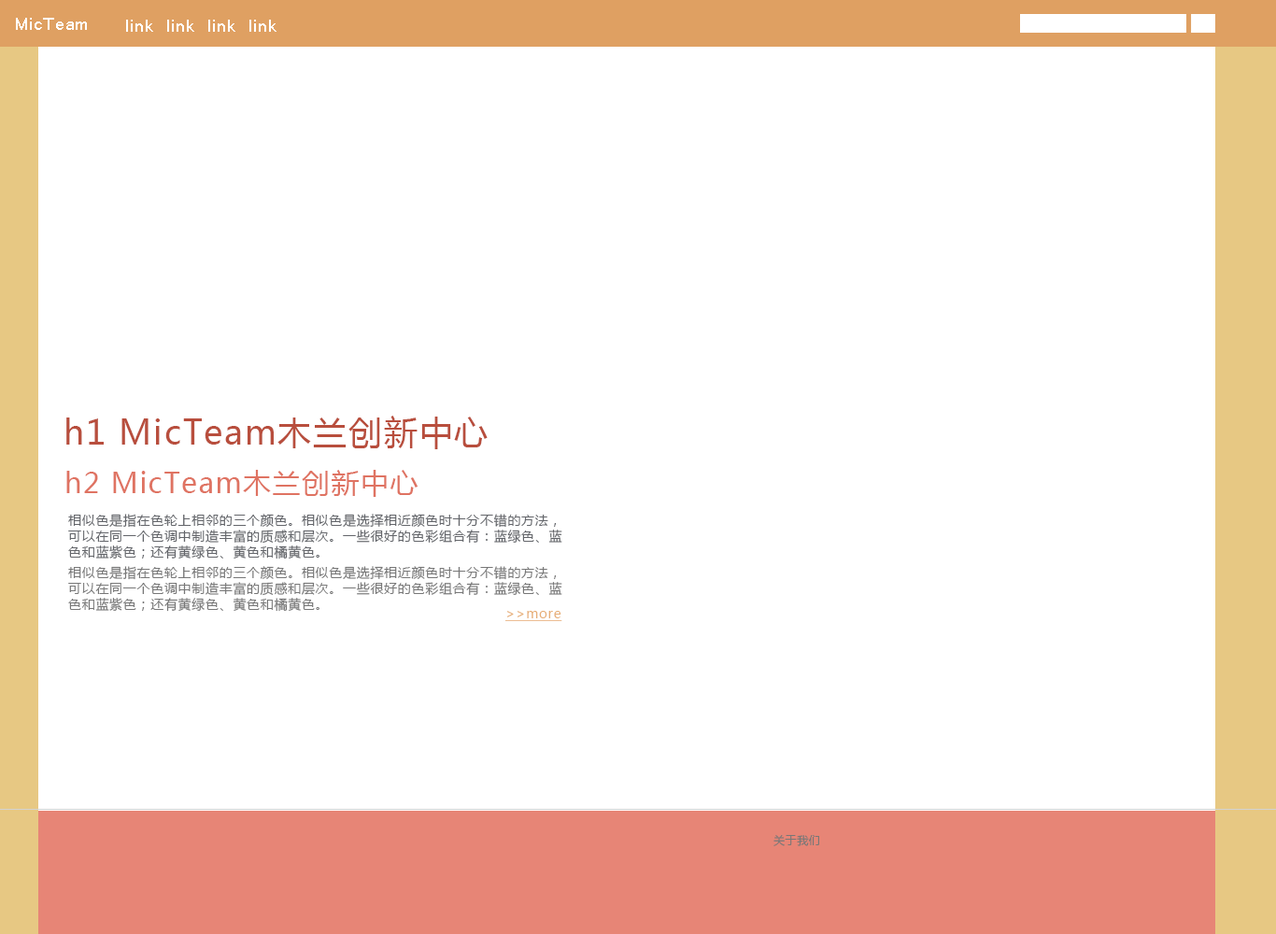
<style>
.page{position:relative;width:1276px;height:934px;background:#ffffff}
.page>*{position:absolute;margin:0}
.t1{font:16.8px "MicrosoftSansSerif";letter-spacing:0.05em;color:#ffffff}
.t2{font:33.6px "MicrosoftYaHei";letter-spacing:0.05em;color:#b84e3d}
.t3{font:28px "MicrosoftYaHei";letter-spacing:0.05em;color:#df7362}
.t4{font:13.1px/15.9px "MicrosoftYaHei";letter-spacing:0.05em;color:#63656a}
.t5{font:13.1px/15.9px "MicrosoftYaHei";letter-spacing:0.05em;color:#777777}
.t6{font:13.1px "MicrosoftYaHei";letter-spacing:0.05em;color:#e7ae76;text-decoration:underline}
.t7{font:11.2px "MicrosoftYaHei";letter-spacing:0.05em;color:#777777}
</style>
<div class="page">
<p class="t1" style="left:16px;top:18px;width:71px;height:12px">MicTeam</p>
<p class="t2" style="left:66px;top:416px;width:422px;height:33px">h1 MicTeam木兰创新中心</p>
<p class="t3" style="left:66px;top:470px;width:353px;height:27px">h2 MicTeam木兰创新中心</p>
<p class="t4" style="left:68px;top:514px;width:494px;height:46px">相似色是指在色轮上相邻的三个颜色。相似色是选择相近颜色时十分不错的方法，<br>可以在同一个色调中制造丰富的质感和层次。一些很好的色彩组合有：蓝绿色、蓝<br>色和蓝紫色；还有黄绿色、黄色和橘黄色。</p>
<p class="t5" style="left:68px;top:566px;width:494px;height:46px">相似色是指在色轮上相邻的三个颜色。相似色是选择相近颜色时十分不错的方法，<br>可以在同一个色调中制造丰富的质感和层次。一些很好的色彩组合有：蓝绿色、蓝<br>色和蓝紫色；还有黄绿色、黄色和橘黄色。</p>
<p class="t6" style="left:505px;top:611px;width:57px;height:10px">&gt;&gt;more</p>
<p class="t7" style="left:774px;top:835px;width:45px;height:11px">关于我们</p>
</div>
